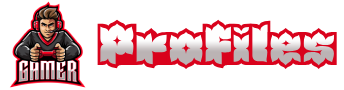
<style>
.page{position:relative;width:344px;height:90px;background:#ffffff}
.page>*{position:absolute;margin:0}
.t1{font:68px "Honk-Flower";color:#d9021c}
</style>
<div class="page">
<p class="t1" style="left:97px;top:19px;width:240px;height:51px">Profiles</p>
</div>
